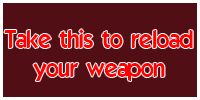
<style>
.page{position:relative;width:200px;height:100px;background:#510e15}
.page>*{position:absolute;margin:0}
.t1{font:24px "ELEGANCE";color:#ff0000}
</style>
<div class="page">
<p class="t1" style="left:4px;top:29px;width:189px;height:52px;text-align:center">Take this to reload<br>your weapon</p>
</div>
